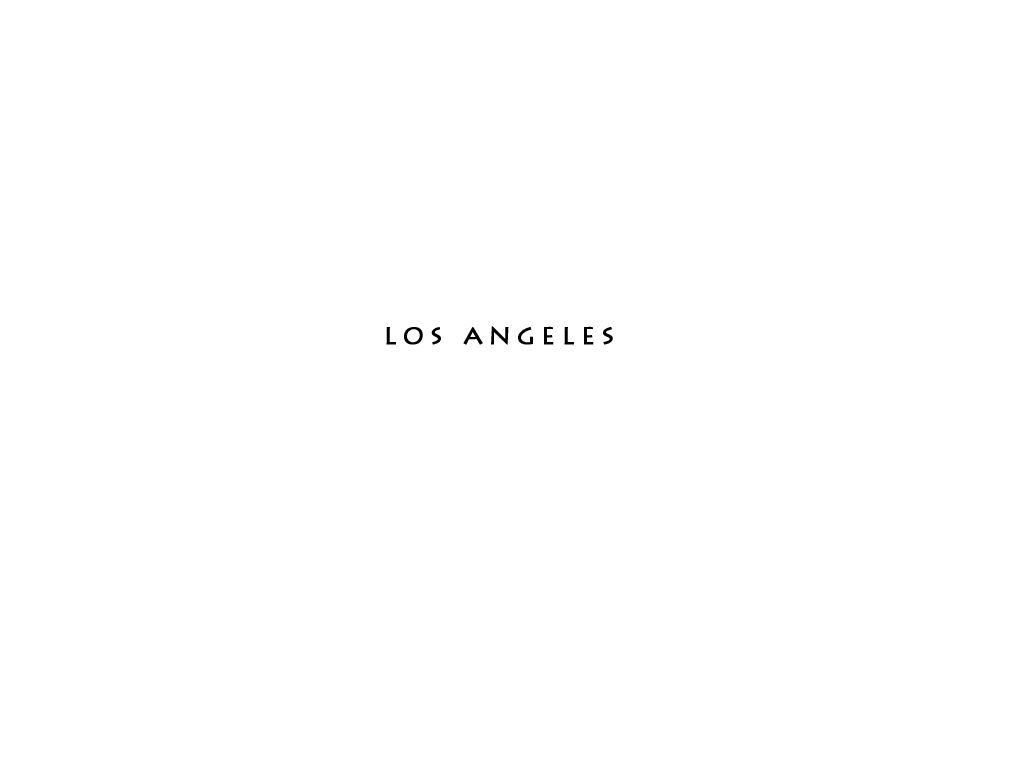
<style>
.page{position:relative;width:1024px;height:768px;background:#ffffff}
.page>*{position:absolute;margin:0}
.t1{font:27.2px "LithosPro-Regular";letter-spacing:0.2em;color:#000000;font-weight:bold}
</style>
<div class="page">
<p class="t1" style="left:386px;top:326px;width:227px;height:19px">los angeles</p>
</div>
